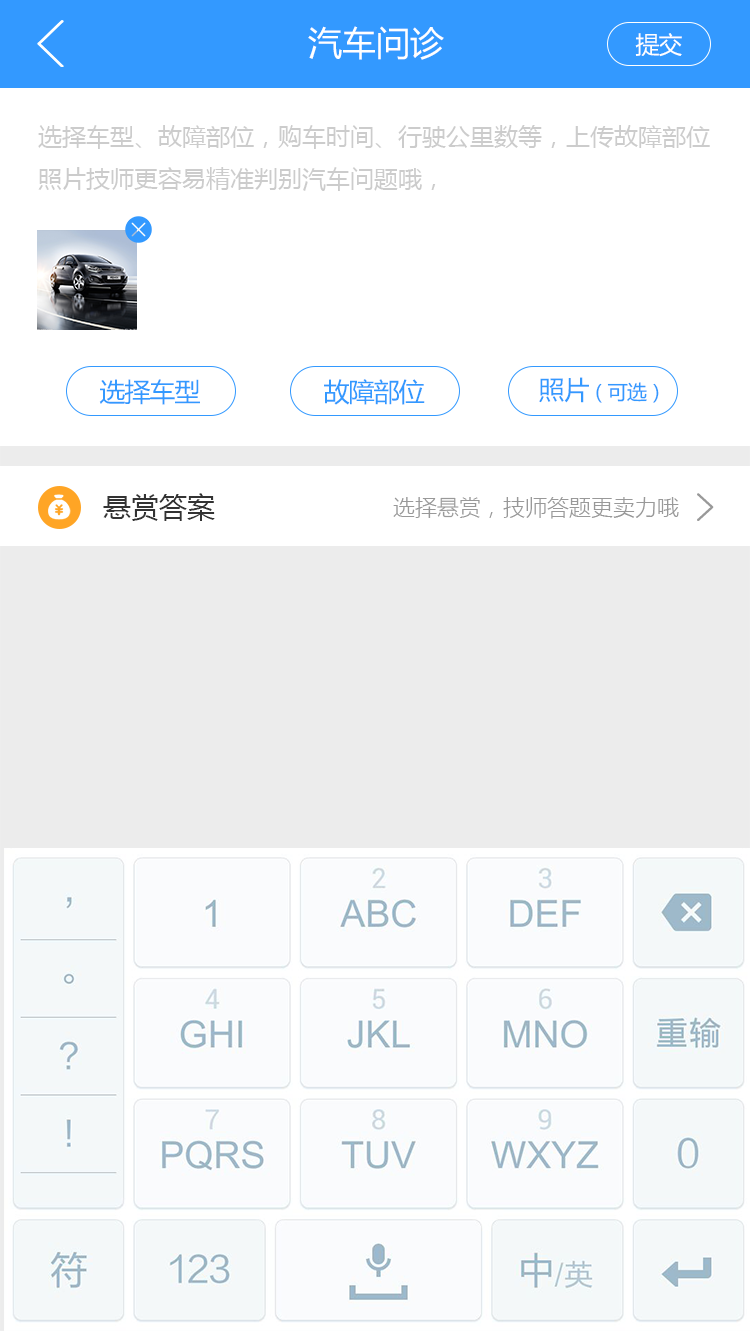
<style>
.page{position:relative;width:750px;height:1331px;background:#ffffff}
.page>*{position:absolute;margin:0}
.t1{font:34px "MicrosoftYaHei";color:#ffffff}
.t2{font:24px "MicrosoftYaHei";letter-spacing:-0.04em;color:#ffffff}
.t3{font:24px "MicrosoftYaHei";color:#cccccc}
.t4{font:20px "MicrosoftYaHei";letter-spacing:-0.04em;color:#3399ff}
.t5{font:26px "MicrosoftYaHei";letter-spacing:-0.04em;color:#3399ff}
.t6{font:28px "MicrosoftYaHei";color:#333333}
.t7{font:22px "MicrosoftYaHeiLight";color:#999999}
</style>
<div class="page">
<p class="t1" style="left:308px;top:26px;width:136px;height:34px">汽车问诊</p>
<p class="t2" style="left:635px;top:33px;width:47px;height:24px">提交</p>
<p class="t3" style="left:38px;top:125px;width:672px;height:66px">选择车型、故障部位，购车时间、行驶公里数等，上传故障部位照片技师更容易精准判别汽车问题哦，</p>
<p class="t4" style="left:539px;top:377px;width:120px;height:26px"><span class="t5">照片</span>（可选）</p>
<p class="t5" style="left:99px;top:379px;width:101px;height:26px">选择车型</p>
<p class="t5" style="left:324px;top:379px;width:101px;height:26px">故障部位</p>
<p class="t6" style="left:103px;top:493px;width:112px;height:28px">悬赏答案</p>
<p class="t7" style="left:393px;top:497px;width:286px;height:22px">选择悬赏，技师答题更卖力哦</p>
</div>
